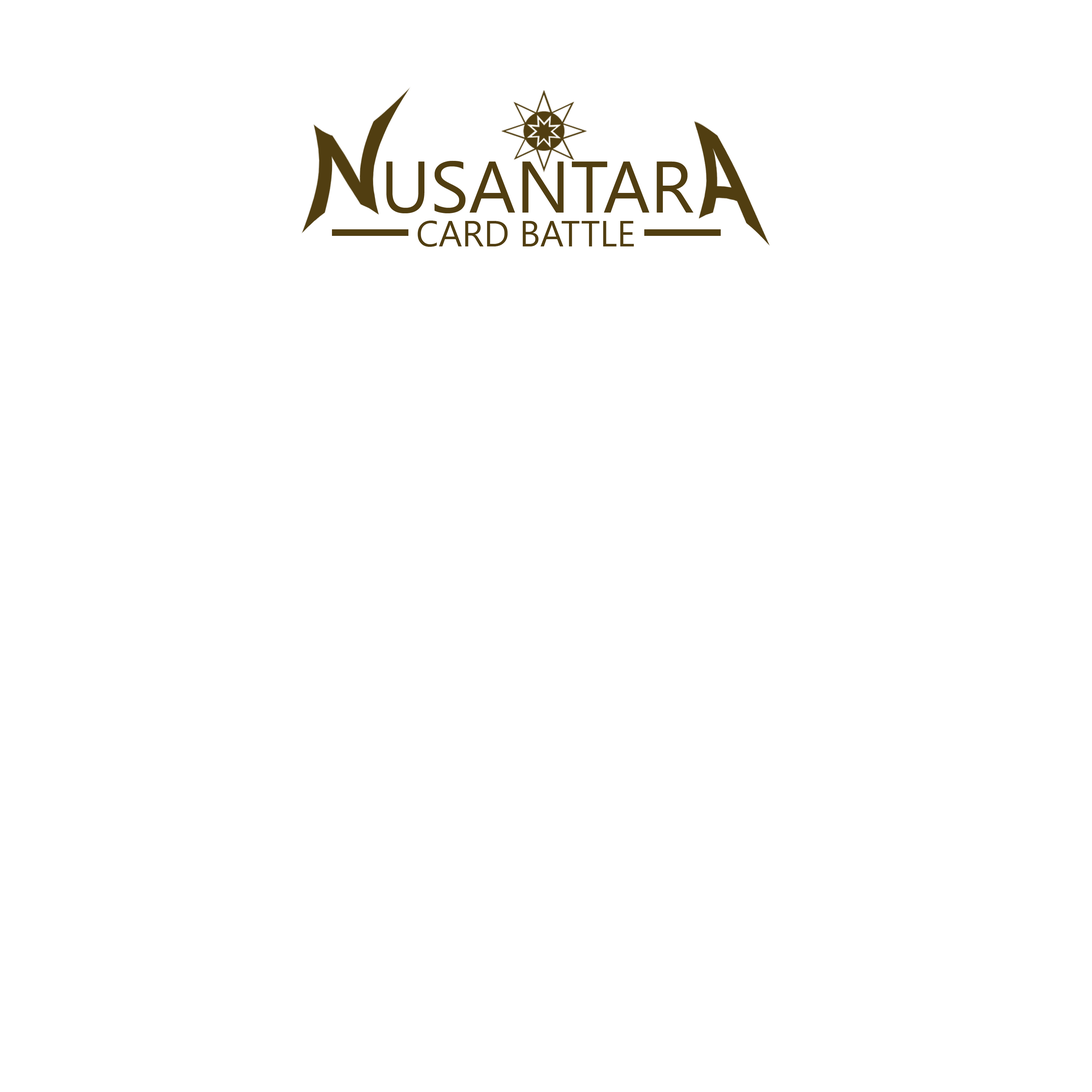
<style>
.page{position:relative;width:1092px;height:1092px;background:#ffffff}
.page>*{position:absolute;margin:0}
.t1{font:72.8px "SegoeUI";color:#513e11}
.t2{font:36.4px "SegoeUI";color:#513e11}
</style>
<div class="page">
<p class="t1" style="left:386px;top:161px;width:307px;height:52px">USANTAR</p>
<p class="t2" style="left:418px;top:221px;width:216px;height:26px">CARD BATTLE</p>
</div>
